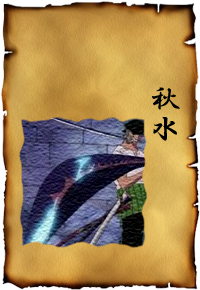
<style>
.page{position:relative;width:200px;height:290px}
.page>*{position:absolute;margin:0}
.t1{font:30px "HGPGyoshotai";color:#000000}
</style>
<div class="page">
<p class="t1" style="left:152px;top:87px;width:28px;height:54px;text-align:center">秋水</p>
</div>
